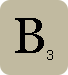
<style>
.page{position:relative;width:68px;height:75px;background:#c1baa0}
.page>*{position:absolute;margin:0}
.t1{font:50px "Georgia";color:#000000}
.t2{font:13.9px "Georgia";color:#000000}
</style>
<div class="page">
<p class="t1" style="left:15px;top:18px;width:29px;height:35px">B</p>
<p class="t2" style="left:47px;top:50px;width:6px;height:10px">3</p>
</div>
